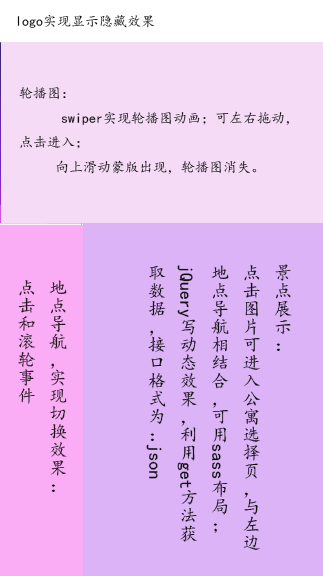
<style>
.page{position:relative;width:323px;height:576px;background:#dcb3f6}
.page>*{position:absolute;margin:0}
.t1{font:14px "¿¬Ìå";color:#0e0f0f}
.t2{font:18px "¿¬Ìå";color:#0e0f0f}
.t3{font:18px "¿¬Ìå";color:#191719}
</style>
<div class="page">
<p class="t1" style="left:17px;top:15px;width:138px;height:13px">logo实现显示隐藏效果</p>
<p class="t1" style="left:19px;top:87px;width:271px;height:87px">轮播图：<br>      swiper实现轮播图动画；可左右拖动，<br>点击进入；<br> 向上滑动蒙版出现，轮播图消失。</p>
<p class="t2" style="left:146px;top:264px;width:146px;height:286px">景点展示：<br>点击图片可进入公寓选择页，与左边<br>地点导航相结合，可用sass布局；<br>jQuery写动态效果，利用get方法获<br>取数据，接口格式为：json</p>
<p class="t3" style="left:18px;top:280px;width:49px;height:212px">地点导航，实现切换效果：<br>点击和滚轮事件</p>
</div>
